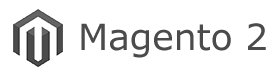
<style>
.page{position:relative;width:280px;height:80px;background:#ffffff}
.page>*{position:absolute;margin:0}
.t1{font:36px "Verdana";color:#4b4b4b}
</style>
<div class="page">
<p class="t1" style="left:81px;top:23px;width:185px;height:35px">Magento 2</p>
</div>
